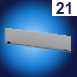
<style>
.page{position:relative;width:77px;height:77px}
.page>*{position:absolute;margin:0}
.t1{font:16px "Arial-BoldMT";color:#182163}
</style>
<div class="page">
<p class="t1" style="left:56px;top:2px;width:15px;height:12px">21</p>
</div>
